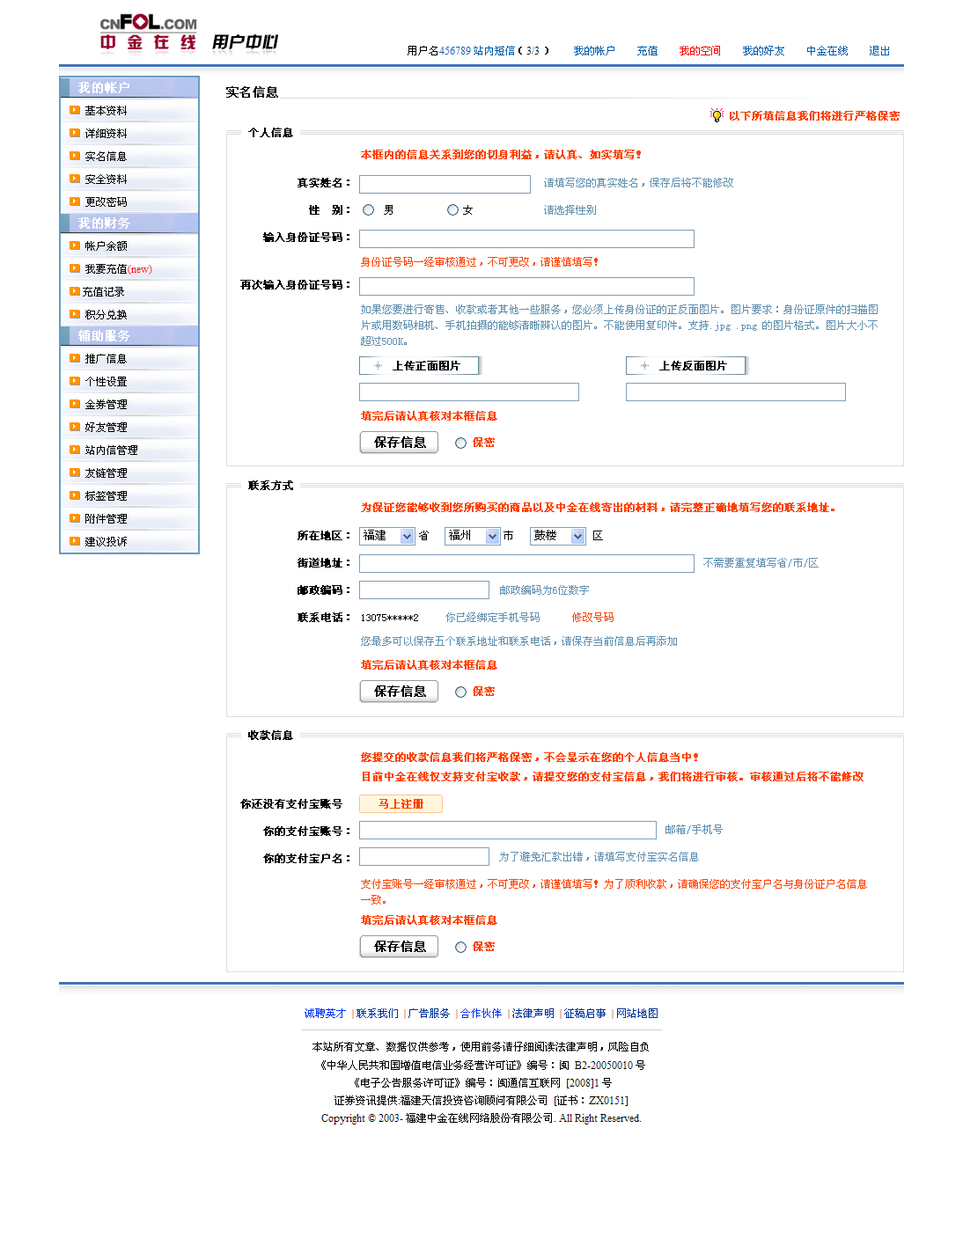
<style>
.page{position:relative;width:963px;height:1238px;background:#ffffff}
.page>*{position:absolute;margin:0}
.t1{font:12.3px "SimSun";color:#000000;font-weight:bold}
.t2{font:10.6px "SimSun";color:#ff4200;font-weight:bold}
.t3{font:10.6px "SimSun";color:#000000;font-weight:bold}
.t4{font:10.6px "SimSun";color:#000000}
.t5{font:10.6px/27.3px "SimSun";color:#000000;font-weight:bold}
.t6{font:10.6px "SimSun";color:#6191b0}
.t7{font:10.6px "SimSun";color:#ff4200}
.t8{font:10.6px/15.8px "SimSun";color:#6191b0}
.t9{font:10.6px/27.3px "SimSun";color:#000000}
.t10{font:10.6px/27.3px "SimSun";color:#6191b0}
.t11{font:10.6px/27.3px "SimSun";color:#ff4200}
.t12{font:10.6px/15.8px "SimSun";color:#ff4200}
</style>
<div class="page">
<p class="t1" style="left:226px;top:86px;width:52px;height:12px">实名信息</p>
<p class="t2" style="left:730px;top:111px;width:170px;height:10px">以下所填信息我们将进行严格保密</p>
<p class="t3" style="left:248px;top:128px;width:45px;height:9px">个人信息</p>
<p class="t2" style="left:361px;top:150px;width:280px;height:9px">本框内的信息关系到您的切身利益，请认真、如实填写！</p>
<p class="t4" style="left:85px;top:151px;width:42px;height:10px">实名信息</p>
<p class="t5" style="left:263px;top:178px;width:86px;height:64px;text-align:right">真实姓名：<br>性　别：<br>输入身份证号码：</p>
<p class="t6" style="left:544px;top:178px;width:189px;height:9px">请填写您的真实姓名，保存后将不能修改</p>
<p class="t4" style="left:384px;top:205px;width:89px;height:10px">男             女</p>
<p class="t6" style="left:544px;top:205px;width:52px;height:10px">请选择性别</p>
<p class="t7" style="left:361px;top:257px;width:237px;height:10px">身份证号码一经审核通过，不可更改，请谨慎填写！</p>
<p class="t3" style="left:240px;top:280px;width:109px;height:10px">再次输入身份证号码：</p>
<p class="t8" style="left:361px;top:305px;width:517px;height:41px">如果您要进行寄售、收款或者其他一些服务，您必须上传身份证的正反面图片。图片要求：身份证原件的扫描图<br>片或用数码相机、手机拍摄的能够清晰辨认的图片。不能使用复印件。支持.jpg .png 的图片格式。图片大小不<br>超过500K。</p>
<p class="t3" style="left:393px;top:361px;width:67px;height:10px">上传正面图片</p>
<p class="t3" style="left:659px;top:361px;width:68px;height:10px">上传反面图片</p>
<p class="t2" style="left:361px;top:411px;width:136px;height:10px">填完后请认真核对本框信息</p>
<p class="t1" style="left:374px;top:437px;width:52px;height:11px">保存信息</p>
<p class="t2" style="left:473px;top:437px;width:22px;height:10px">保密</p>
<p class="t3" style="left:248px;top:481px;width:45px;height:9px">联系方式</p>
<p class="t2" style="left:361px;top:503px;width:473px;height:9px">为保证您能够收到您所购买的商品以及中金在线寄出的材料，请完整正确地填写您的联系地址。</p>
<p class="t5" style="left:297px;top:531px;width:316px;height:91px">所在地区：<br>街道地址：<br>邮政编码：<br>联系电话： <span class="t9">13075*****2     </span><span class="t10">你已经绑定手机号码      </span><span class="t11">修改号码</span></p>
<p class="t4" style="left:419px;top:531px;width:184px;height:9px">省              市               区</p>
<p class="t6" style="left:703px;top:558px;width:116px;height:10px">不需要重复填写省/市/区</p>
<p class="t6" style="left:500px;top:585px;width:89px;height:10px">邮政编码为6位数字</p>
<p class="t6" style="left:361px;top:636px;width:316px;height:10px">您最多可以保存五个联系地址和联系电话，请保存当前信息后再添加</p>
<p class="t2" style="left:361px;top:660px;width:136px;height:10px">填完后请认真核对本框信息</p>
<p class="t1" style="left:374px;top:686px;width:52px;height:11px">保存信息</p>
<p class="t2" style="left:473px;top:687px;width:22px;height:9px">保密</p>
<p class="t3" style="left:248px;top:731px;width:45px;height:9px">收款信息</p>
<p class="t2" style="left:361px;top:753px;width:337px;height:9px">您提交的收款信息我们将严格保密，不会显示在您的个人信息当中！</p>
<p class="t2" style="left:363px;top:772px;width:500px;height:10px">目前中金在线仅支持支付宝收款，请提交您的支付宝信息，我们将进行审核。审核通过后将不能修改</p>
<p class="t3" style="left:240px;top:799px;width:102px;height:10px">你还没有支付宝账号</p>
<p class="t2" style="left:378px;top:799px;width:45px;height:10px">马上注册</p>
<p class="t5" style="left:263px;top:826px;width:86px;height:37px">你的支付宝账号：<br>你的支付宝户名：</p>
<p class="t6" style="left:665px;top:825px;width:58px;height:9px">邮箱/手机号</p>
<p class="t6" style="left:499px;top:852px;width:200px;height:10px">为了避免汇款出错，请填写支付宝实名信息</p>
<p class="t12" style="left:361px;top:879px;width:506px;height:26px">支付宝账号一经审核通过，不可更改，请谨慎填写！为了顺利收款，请确保您的支付宝户名与身份证户名信息<br>一致。</p>
<p class="t2" style="left:361px;top:915px;width:136px;height:10px">填完后请认真核对本框信息</p>
<p class="t1" style="left:374px;top:941px;width:52px;height:11px">保存信息</p>
<p class="t2" style="left:473px;top:942px;width:22px;height:9px">保密</p>
</div>
